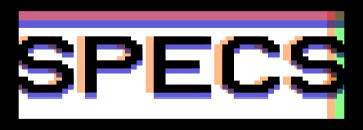
<style>
.page{position:relative;width:363px;height:130px;background:#000000}
.page>*{position:absolute;margin:0}
.t1{font:82.3px "VCROSDMono";color:#000000;scale:1.42 1}
</style>
<div class="page">
<p class="t1" style="left:16px;top:36px;width:333px;height:57px">SPECS</p>
</div>
